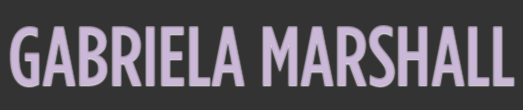
<style>
.page{position:relative;width:523px;height:110px;background:#333333}
.page>*{position:absolute;margin:0}
.t1{font:85px "GothamHTF-MediumCondensed";color:#cccccc;text-transform:uppercase}
</style>
<div class="page">
<p class="t1" style="left:10px;top:25px;width:504px;height:61px">Gabriela Marshall</p>
</div>
